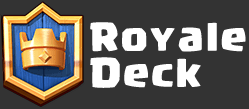
<style>
.page{position:relative;width:249px;height:109px;background:#333333}
.page>*{position:absolute;margin:0}
.t1{font:30px "Supercell-Magic";letter-spacing:0.075em;color:#ffffff}
</style>
<div class="page">
<p class="t1" style="left:90px;top:22px;width:156px;height:66px">Royale<br>Deck</p>
</div>
